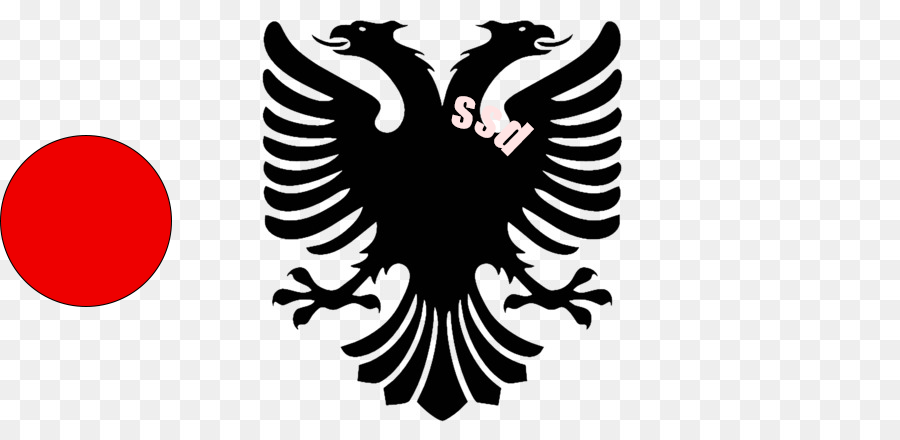
<style>
.page{position:relative;width:900px;height:440px;background:#ffffff}
.page>*{position:absolute;margin:0}
.t1{font:48px "Impact";color:#ffe4e4}
</style>
<div class="page">
<p class="t1" style="left:451px;top:96px;width:83px;height:61px">ssd</p>
</div>
